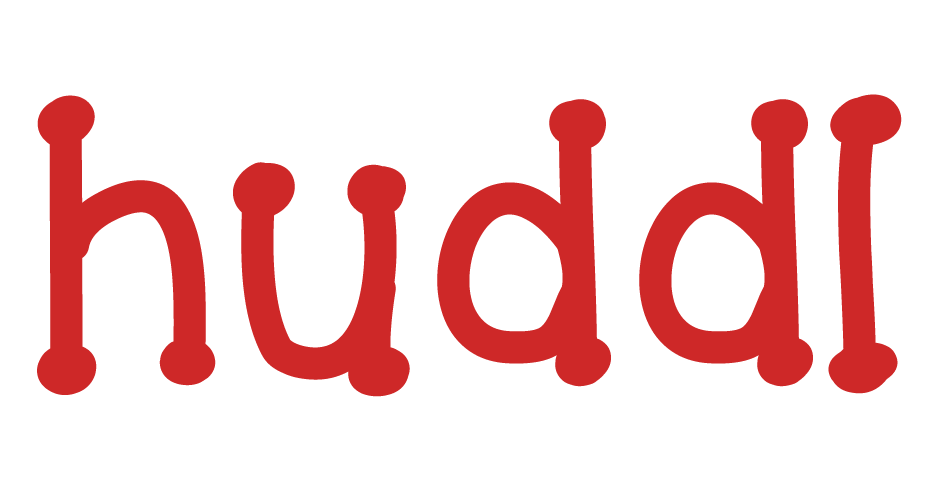
<style>
.page{position:relative;width:940px;height:492px;background:#ffffff}
.page>*{position:absolute;margin:0}
.t1{font:350.8px "GelDoticaLowerCaseThick";color:#ce2828}
</style>
<div class="page">
<p class="t1" style="left:37px;top:94px;width:865px;height:303px">huddl</p>
</div>
